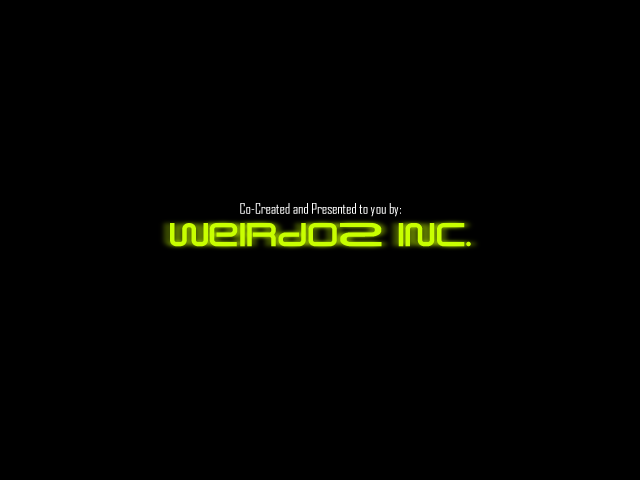
<style>
.page{position:relative;width:640px;height:480px;background:#000000}
.page>*{position:absolute;margin:0}
.t1{font:14px "AgencyFB-Reg";color:#ffffff}
.t2{font:40px "WeirdoZ";color:#c8ff00}
</style>
<div class="page">
<p class="t1" style="left:240px;top:203px;width:161px;height:14px">Co-Created and Presented to you by:</p>
<p class="t2" style="left:170px;top:223px;width:301px;height:24px">WeirdoZ Inc.</p>
</div>
